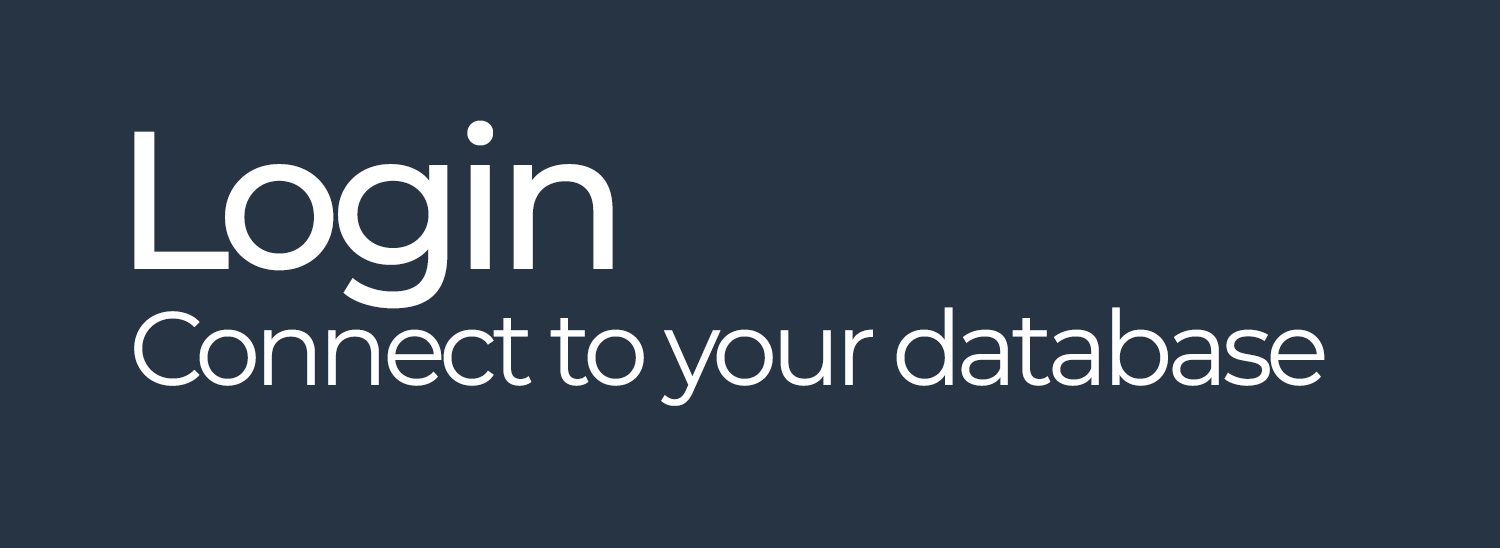
<style>
.page{position:relative;width:1500px;height:548px;background:#273444}
.page>*{position:absolute;margin:0}
.t1{font:195.8px "MontserratRoman-Medium";letter-spacing:-0.06em;color:#ffffff}
.t2{font:104.2px "MontserratRoman-Regular";letter-spacing:-0.06em;color:#ffffff}
</style>
<div class="page">
<p class="t1" style="left:134px;top:120px;width:479px;height:189px">Login</p>
<p class="t2" style="left:134px;top:307px;width:1191px;height:99px">Connect to your database</p>
</div>
